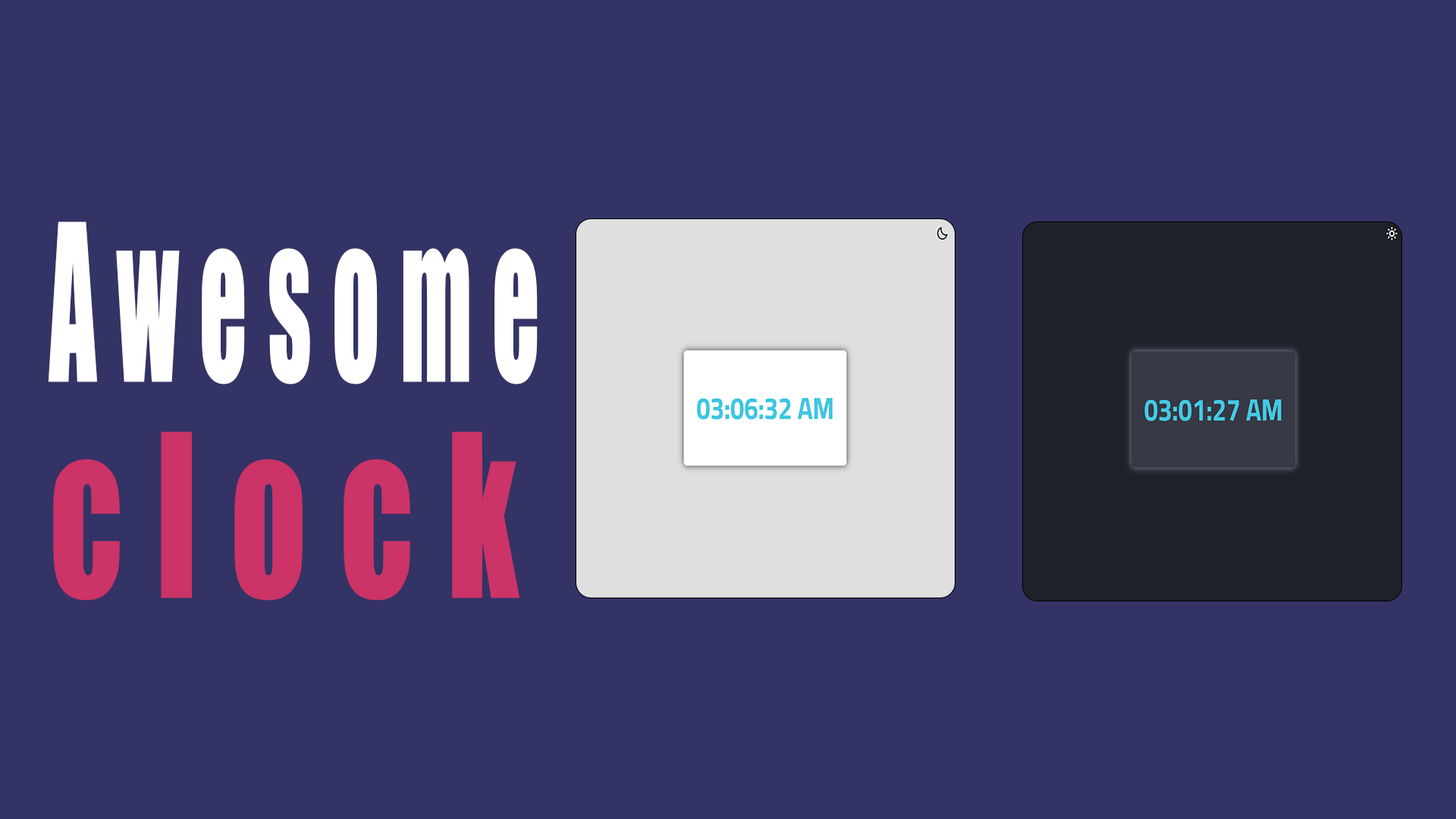
<style>
.page{position:relative;width:1456px;height:819px;background:#333366}
.page>*{position:absolute;margin:0}
.t1{font:202.1px "Impact";letter-spacing:0.2em;color:#ffffff;font-weight:bold;scale:0.46 1}
.t2{font:209.5px "Impact";letter-spacing:0.2em;color:#cc3366;font-weight:bold;scale:0.71 1}
</style>
<div class="page">
<p class="t1" style="left:48px;top:221px;width:490px;height:163px">Awesome</p>
<p class="t2" style="left:53px;top:431px;width:466px;height:170px">clock</p>
</div>
